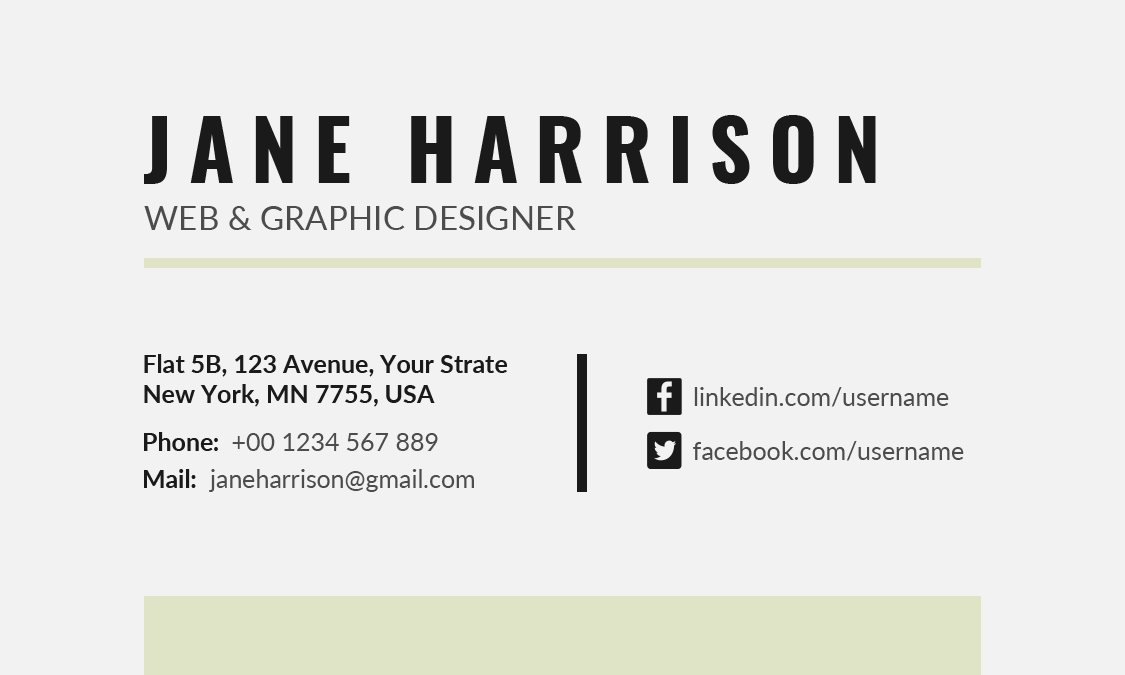
<style>
.page{position:relative;width:1125px;height:675px;background:#f2f2f2}
.page>*{position:absolute;margin:0}
.t1{font:83.3px "Oswald-Bold";letter-spacing:0.2em;color:#1a1a1a;text-transform:uppercase}
.t2{font:33.3px "Lato-Regular";color:#4c4c4c;text-transform:uppercase}
.t3{font:25px "Lato-Bold";color:#1a1a1a}
.t4{font:25px "Lato-Regular";color:#4c4c4c}
.t5{font:25.4px "Lato-Regular";color:#4c4c4c}
</style>
<div class="page">
<p class="t1" style="left:144px;top:115px;width:732px;height:69px">Jane Harrison</p>
<p class="t2" style="left:144px;top:206px;width:432px;height:24px">Web &amp; Graphic Designer</p>
<p class="t3" style="left:144px;top:354px;width:364px;height:53px">Flat 5B, 123 Avenue, Your Strate<br>New York, MN 7755, USA</p>
<p class="t4" style="left:694px;top:387px;width:255px;height:20px">linkedin.com/username</p>
<p class="t4" style="left:144px;top:432px;width:294px;height:19px"><span class="t3">Phone:  </span>+00 1234 567 889</p>
<p class="t5" style="left:693px;top:441px;width:271px;height:20px">facebook.com/username</p>
<p class="t4" style="left:144px;top:469px;width:330px;height:23px"><span class="t3">Mail:</span>  janeharrison@gmail.com</p>
</div>
